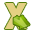
<style>
.page{position:relative;width:32px;height:32px;background:#ffffff}
.page>*{position:absolute;margin:0}
.t1{font:39px "Bauhaus93";color:#e4d083}
</style>
<div class="page">
<p class="t1" style="left:4px;top:3px;width:23px;height:26px">X</p>
</div>
